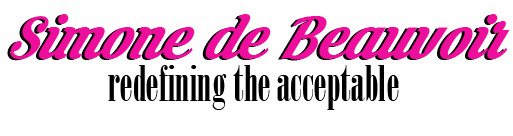
<style>
.page{position:relative;width:513px;height:136px;background:#ffffff}
.page>*{position:absolute;margin:0}
.t1{font:80px "KrinkesRegularPERSONALUSE";color:#ed0e9c;font-style:italic}
.t2{font:48px "Onyx";color:#000000}
</style>
<div class="page">
<p class="t1" style="left:7px;top:15px;width:500px;height:46px">Simone de Beauvoir</p>
<p class="t1" style="left:10px;top:14px;width:500px;height:46px">Simone de Beauvoir</p>
<p class="t2" style="left:108px;top:65px;width:291px;height:45px">redefining the acceptable</p>
</div>
